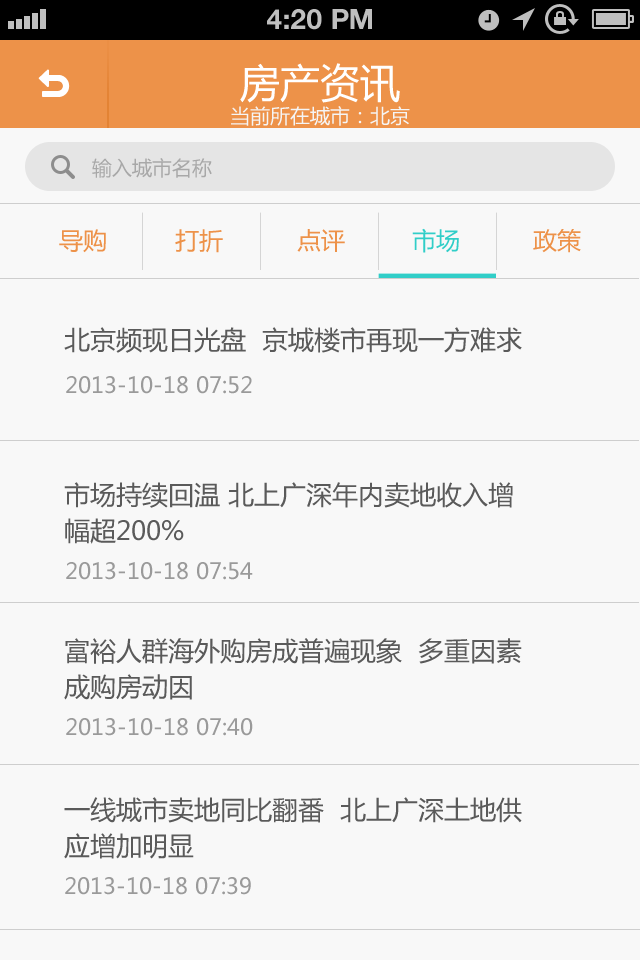
<style>
.page{position:relative;width:640px;height:960px;background:#f8f8f8}
.page>*{position:absolute;margin:0}
.t1{font:28px "HelveticaNeue-Bold";color:#bfbfbf;text-transform:uppercase}
.t2{font:40px "MicrosoftYaHei";color:#ffffff}
.t3{font:20px "MicrosoftYaHei";color:#f5f5f5}
.t4{font:20px "MicrosoftYaHei";color:#a8a8a8}
.t5{font:24px "MicrosoftYaHei";color:#ed9249}
.t6{font:24px "MicrosoftYaHei";color:#31cec8}
.t7{font:26px "MicrosoftYaHei";color:#5a5a5a}
.t8{font:22px "MicrosoftYaHei";color:#9a9a9a}
.t9{font:26px/36px "MicrosoftYaHei";color:#5a5a5a}
</style>
<div class="page">
<p class="t1" style="left:267px;top:9px;width:105px;height:21px">4:20 PM</p>
<p class="t2" style="left:240px;top:63px;width:160px;height:40px">房产资讯</p>
<p class="t3" style="left:231px;top:106px;width:179px;height:20px">当前所在城市：北京</p>
<p class="t4" style="left:92px;top:158px;width:120px;height:20px">输入城市名称</p>
<p class="t5" style="left:59px;top:229px;width:47px;height:24px">导购</p>
<p class="t5" style="left:175px;top:229px;width:48px;height:24px">打折</p>
<p class="t5" style="left:297px;top:229px;width:48px;height:23px">点评</p>
<p class="t6" style="left:412px;top:228px;width:47px;height:25px">市场</p>
<p class="t5" style="left:533px;top:229px;width:48px;height:24px">政策</p>
<p class="t7" style="left:64px;top:327px;width:458px;height:26px">北京频现日光盘  京城楼市再现一方难求</p>
<p class="t8" style="left:66px;top:376px;width:186px;height:18px">2013-10-18 07:52</p>
<p class="t9" style="left:64px;top:482px;width:449px;height:62px">市场持续回温 北上广深年内卖地收入增<br>幅超200%</p>
<p class="t8" style="left:66px;top:562px;width:187px;height:18px">2013-10-18 07:54</p>
<p class="t9" style="left:64px;top:638px;width:458px;height:62px">富裕人群海外购房成普遍现象  多重因素<br>成购房动因</p>
<p class="t8" style="left:66px;top:718px;width:187px;height:18px">2013-10-18 07:40</p>
<p class="t9" style="left:64px;top:797px;width:458px;height:62px">一线城市卖地同比翻番  北上广深土地供<br>应增加明显</p>
<p class="t8" style="left:65px;top:877px;width:186px;height:18px">2013-10-18 07:39</p>
</div>
